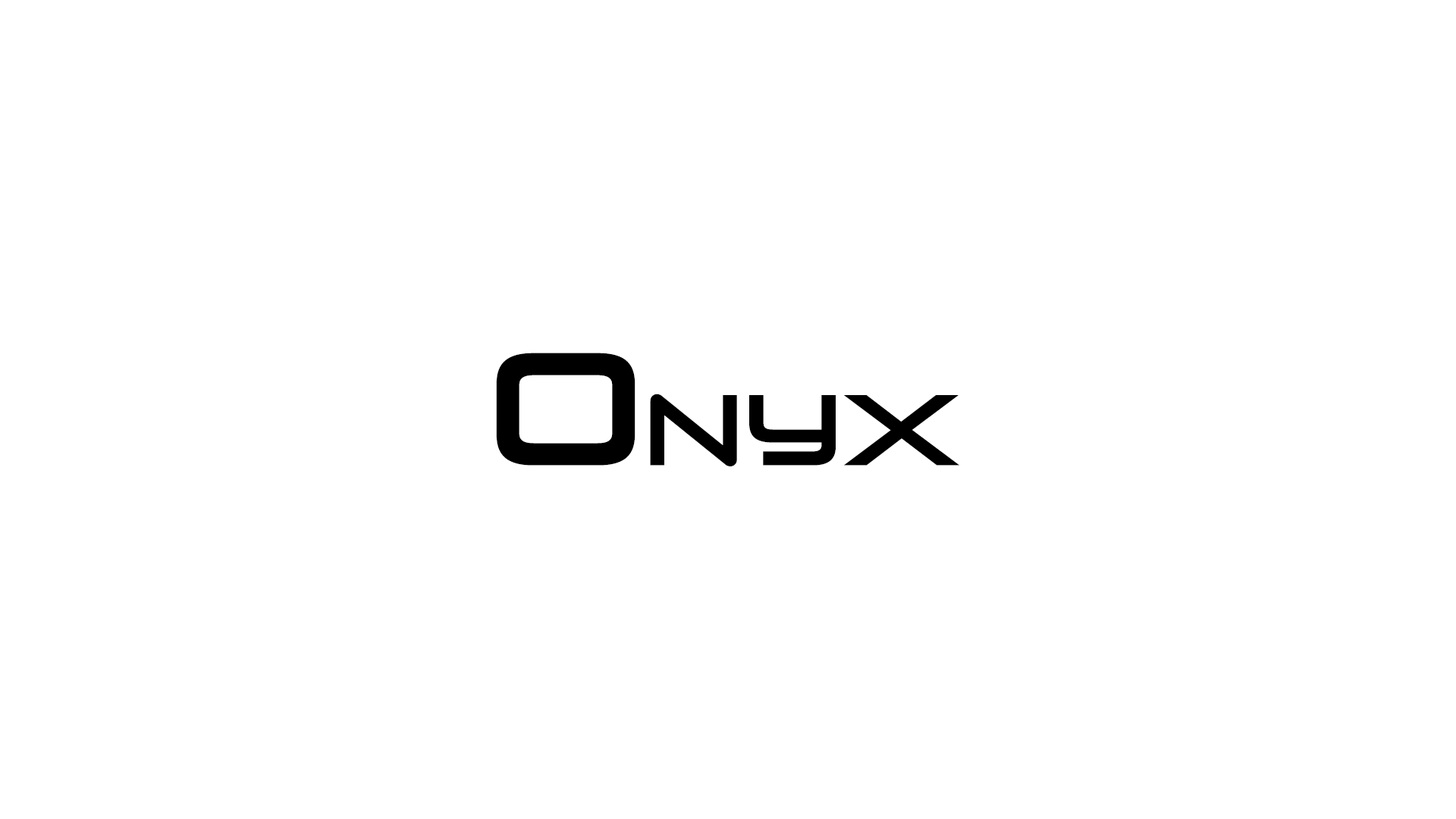
<style>
.page{position:relative;width:1456px;height:819px;background:#ffffff}
.page>*{position:absolute;margin:0}
.t1{font:94.8px "VenusRising-Regular";color:#000000}
.t2{font:151.7px "VenusRising-Regular";color:#000000}
</style>
<div class="page">
<p class="t1" style="left:496px;top:353px;width:463px;height:113px"><span class="t2">O</span>nyx</p>
</div>
